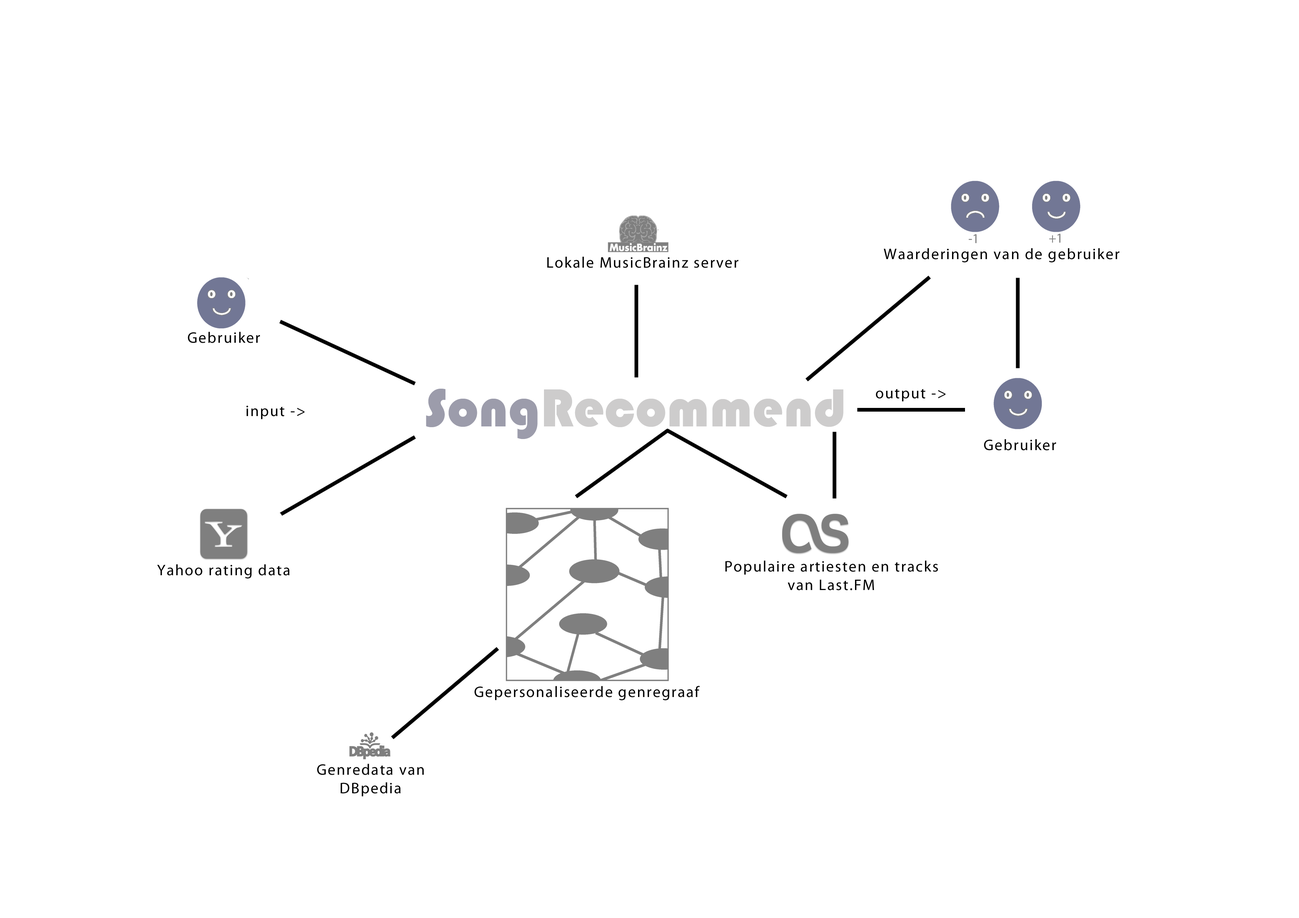
<style>
.page{position:relative;width:1299px;height:918px;background:#ffffff}
.page>*{position:absolute;margin:0}
.t1{font:15.4px "MyriadPro-Regular";letter-spacing:0.075em;color:#000000}
</style>
<div class="page">
<p class="t1" style="left:547px;top:257px;width:191px;height:11px">Lokale MusicBrainz server</p>
<p class="t1" style="left:883px;top:248px;width:236px;height:14px">Waarderingen van de gebruiker</p>
<p class="t1" style="left:188px;top:332px;width:72px;height:11px">Gebruiker</p>
<p class="t1" style="left:876px;top:389px;width:70px;height:13px">output -&gt;</p>
<p class="t1" style="left:246px;top:406px;width:59px;height:13px">input -&gt;</p>
<p class="t1" style="left:984px;top:439px;width:72px;height:12px">Gebruiker</p>
<p class="t1" style="left:157px;top:564px;width:133px;height:15px">Yahoo rating data</p>
<p class="t1" style="left:725px;top:561px;width:213px;height:30px;text-align:center">Populaire artiesten en tracks<br>van Last.FM</p>
<p class="t1" style="left:474px;top:686px;width:226px;height:14px">Gepersonaliseerde genregraaf</p>
<p class="t1" style="left:317px;top:764px;width:107px;height:33px;text-align:center">Genredata van<br>DBpedia</p>
</div>
